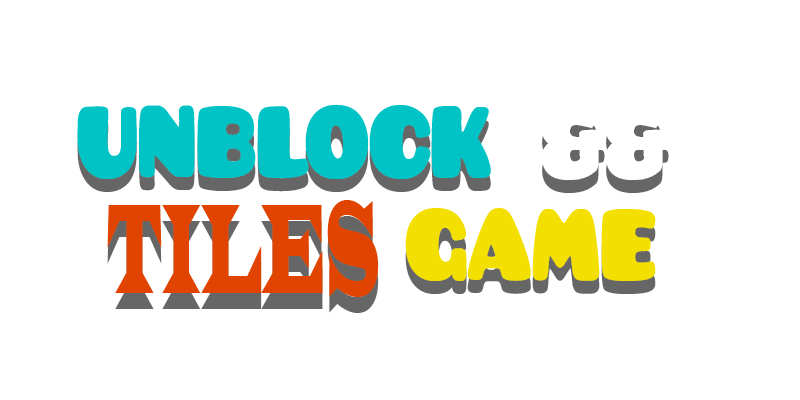
<style>
.page{position:relative;width:800px;height:400px;background:#ffffff}
.page>*{position:absolute;margin:0}
.t1{font:110.2px "Pusab";letter-spacing:-0.02em;color:#00c3c5;scale:0.82 1}
.t2{font:110.2px "Pusab";letter-spacing:-0.02em;color:#ffffff;scale:0.82 1}
.t3{font:132.4px "LatinWide";letter-spacing:-0.02em;color:#e04400;scale:0.35 1}
.t4{font:110.2px "Pusab";letter-spacing:-0.02em;color:#f3df00;scale:0.82 1}
.t5{font:132.4px "LatinWide";letter-spacing:-0.02em;scale:0.35 1}
</style>
<div class="page">
<p class="t1" style="left:77px;top:104px;width:414px;height:75px">UNBLOCK</p>
<p class="t2" style="left:542px;top:106px;width:127px;height:75px">&amp;&amp;</p>
<p class="t1" style="left:77px;top:117px;width:414px;height:75px">UNBLOCK</p>
<p class="t3" style="left:107px;top:200px;width:272px;height:97px">TILES</p>
<p class="t4" style="left:405px;top:208px;width:251px;height:73px">GAME</p>
<p class="t5" style="left:107px;top:216px;width:272px;height:97px">TILES</p>
<p class="t4" style="left:405px;top:221px;width:251px;height:73px">GAME</p>
</div>
